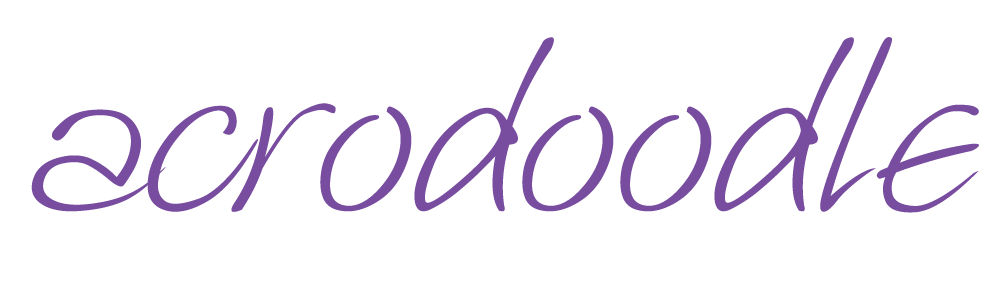
<style>
.page{position:relative;width:1000px;height:284px;background:#ffffff}
.page>*{position:absolute;margin:0}
.t1{font:145.8px "Kingthings-Wrote";letter-spacing:0.05em;color:#784d9f;font-style:italic}
</style>
<div class="page">
<p class="t1" style="left:31px;top:37px;width:948px;height:176px">acrodoodle</p>
</div>
